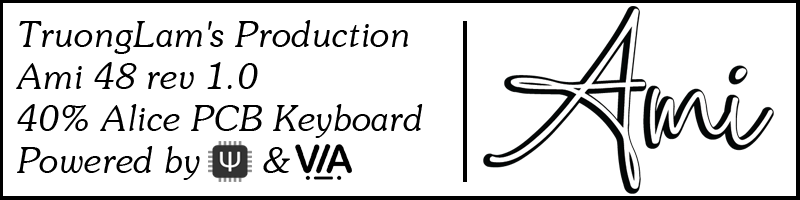
<style>
.page{position:relative;width:800px;height:200px;background:#ffffff}
.page>*{position:absolute;margin:0}
.t1{font:35px "UVNSaigonItalic";color:#000000}
</style>
<div class="page">
<p class="t1" style="left:16px;top:20px;width:407px;height:160px">TruongLam's Production<br>Ami 48 rev 1.0<br>40% Alice PCB Keyboard<br>Powered by      &amp;</p>
</div>
